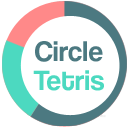
<style>
.page{position:relative;width:128px;height:128px;background:#ffffff}
.page>*{position:absolute;margin:0}
.t1{font:29.3px/29.3px "CoolveticaRg-Regular";letter-spacing:0.018em;color:#4c7981}
.t2{font:29.3px/29.3px "CoolveticaRg-Regular";letter-spacing:0.018em;color:#4cd9c0}
</style>
<div class="page">
<p class="t1" style="left:33px;top:41px;width:71px;height:50px;text-align:center">Circle<br><span class="t2">Tetris</span></p>
</div>
